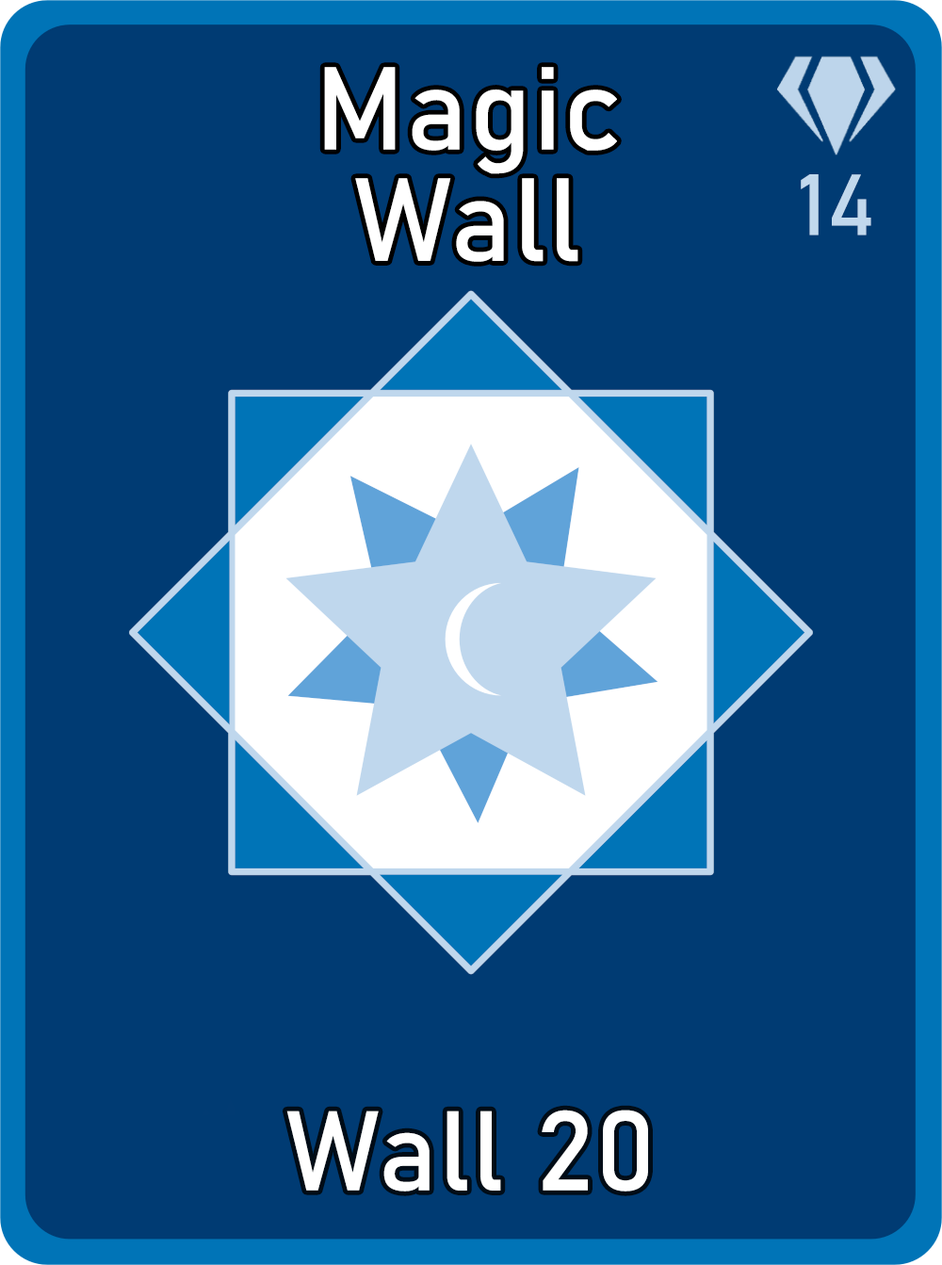
<style>
.page{position:relative;width:942px;height:1265px;background:#003b73}
.page>*{position:absolute;margin:0}
.t1{font:115.9px/111.3px "Bahnschrift";letter-spacing:0.01em;color:#ffffff}
.t2{font:85px "Bahnschrift";letter-spacing:0.01em;color:#c1d8ed}
.t3{font:111.3px "Bahnschrift";letter-spacing:0.01em;color:#ffffff}
</style>
<div class="page">
<p class="t1" style="left:324px;top:67px;width:293px;height:195px;text-align:center">Magic<br>Wall</p>
<p class="t2" style="left:801px;top:174px;width:71px;height:62px">14</p>
<p class="t3" style="left:286px;top:1110px;width:362px;height:82px">Wall 20</p>
</div>
